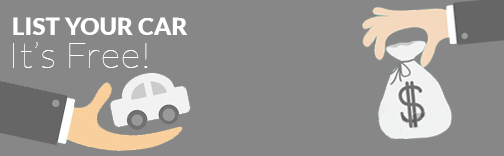
<style>
.page{position:relative;width:504px;height:156px;background:#878787}
.page>*{position:absolute;margin:0}
.t1{font:22.6px "Lato-Black";letter-spacing:0.015em;color:#ffffff;scale:1.04 1}
.t2{font:36.1px "Lato-Hairline";letter-spacing:0.015em;color:#ffffff;scale:1.04 1}
</style>
<div class="page">
<p class="t1" style="left:13px;top:17px;width:175px;height:18px">LIST YOUR CAR</p>
<p class="t2" style="left:13px;top:42px;width:135px;height:26px">It’s Free!</p>
</div>
